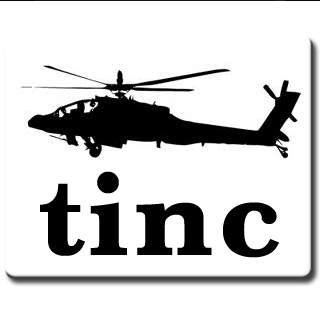
<style>
.page{position:relative;width:320px;height:320px;background:#ffffff}
.page>*{position:absolute;margin:0}
.t1{font:108px "BaskervilleBE-Bold";letter-spacing:0.075em;color:#000000}
</style>
<div class="page">
<p class="t1" style="left:40px;top:170px;width:239px;height:87px">tinc</p>
</div>
